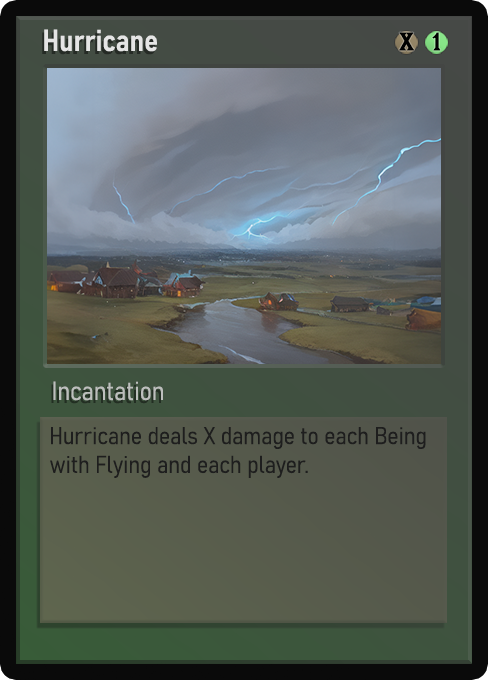
<style>
.page{position:relative;width:488px;height:680px}
.page>*{position:absolute;margin:0}
.t1{font:30px "Bahnschrift-SemiBoldSemiCondensed";color:#f2f2f2;font-weight:bold}
.t2{font:25px "WTRRoycroft";color:#000000;font-weight:bold;scale:1.09 1}
.t3{font:26px "Bahnschrift-LightSemiCondensed";color:#c8c8c8;font-weight:bold}
.t4{font:24px "Bahnschrift-LightSemiCondensed";color:#1e1e1e;font-weight:bold}
</style>
<div class="page">
<p class="t1" style="left:44px;top:29px;width:113px;height:23px;opacity:0.9">Hurricane</p>
<p class="t2" style="left:399px;top:32px;width:15px;height:19px">X</p>
<p class="t2" style="left:432px;top:32px;width:9px;height:19px">1</p>
<p class="t3" style="left:53px;top:381px;width:110px;height:20px;opacity:0.9">Incantation</p>
<p class="t4" style="left:50px;top:427px;width:376px;height:51px">Hurricane deals X damage to each Being with Flying and each player.</p>
</div>
